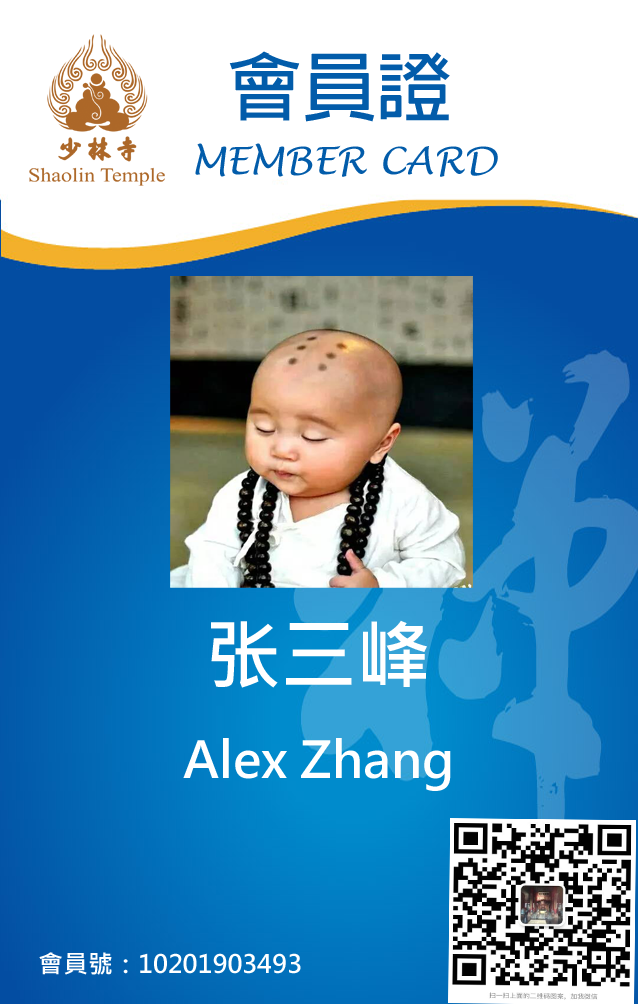
<style>
.page{position:relative;width:638px;height:1004px;background:#ffffff}
.page>*{position:absolute;margin:0}
.t1{font:75px "AdobeFanHeitiStd-Bold";color:#025caa}
.t2{font:37.5px "LucidaHandwriting-Italic";color:#025caa}
.t3{font:75px "MicrosoftJhengHeiBold";color:#ffffff}
.t4{font:50px "MicrosoftJhengHeiBold";color:#ffffff}
.t5{font:25px "MicrosoftJhengHeiBold";color:#ffffff}
</style>
<div class="page">
<p class="t1" style="left:229px;top:51px;width:221px;height:71px">會員證</p>
<p class="t2" style="left:195px;top:143px;width:303px;height:34px">MEMBER CARD</p>
<p class="t3" style="left:211px;top:620px;width:216px;height:68px">张三峰</p>
<p class="t4" style="left:183px;top:738px;width:268px;height:53px">Alex Zhang</p>
<p class="t5" style="left:39px;top:952px;width:262px;height:23px">會員號：10201903493</p>
</div>
